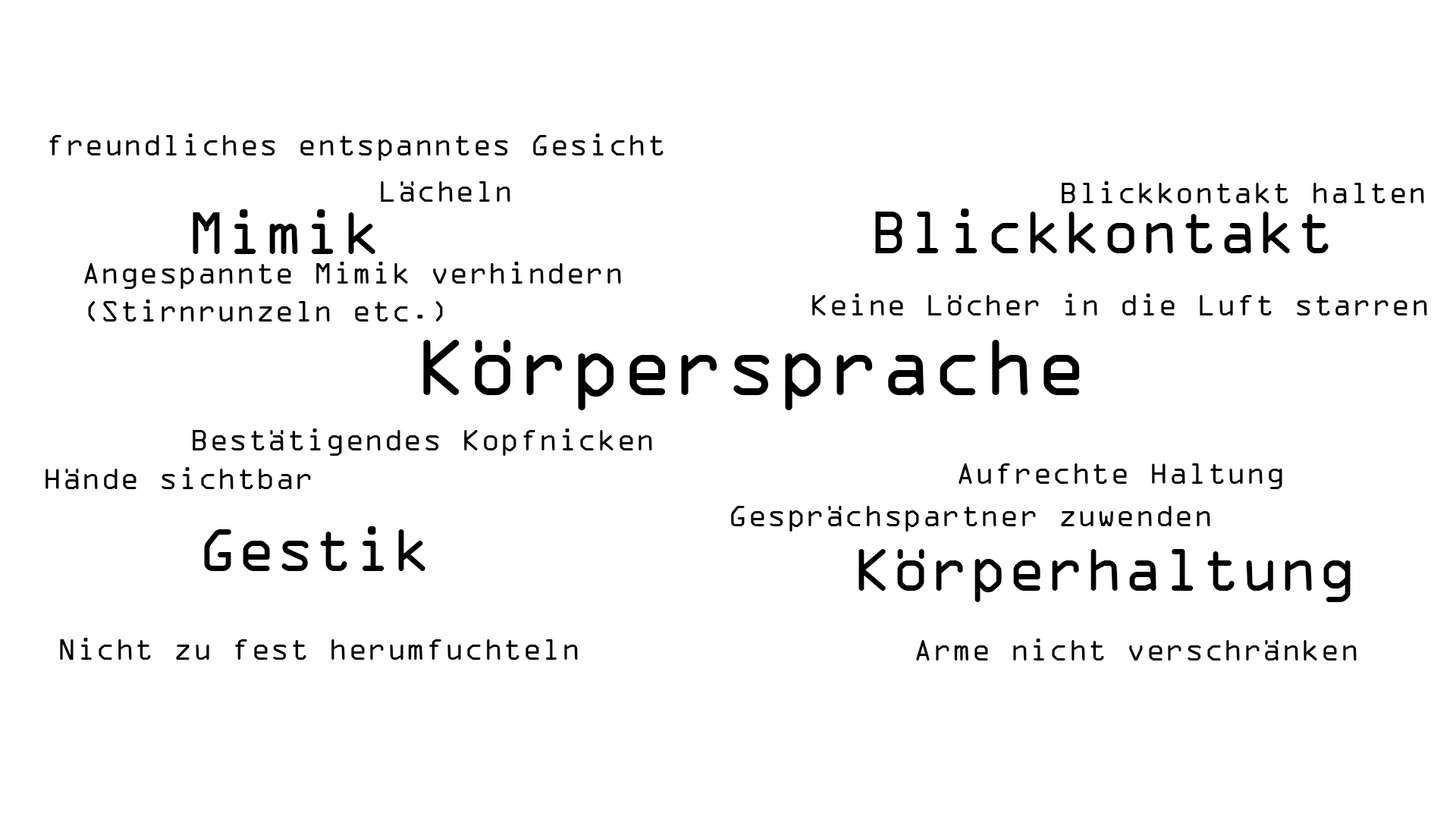
<style>
.page{position:relative;width:1456px;height:819px;background:#ffffff}
.page>*{position:absolute;margin:0}
.t1{font:32.1px "OCRAExtended";color:#000000}
.t2{font:64.2px "OCRAExtended";color:#000000}
.t3{font:85.6px "OCRAExtended";color:#000000}
</style>
<div class="page">
<p class="t1" style="left:49px;top:133px;width:615px;height:28px">freundliches entspanntes Gesicht</p>
<p class="t1" style="left:381px;top:181px;width:129px;height:21px">Lächeln</p>
<p class="t1" style="left:1062px;top:181px;width:362px;height:22px">Blickkontakt halten</p>
<p class="t2" style="left:193px;top:209px;width:182px;height:45px">Mimik</p>
<p class="t2" style="left:875px;top:209px;width:454px;height:44px">Blickkontakt</p>
<p class="t1" style="left:84px;top:262px;width:537px;height:60px">Angespannte Mimik verhindern <br>(Stirnrunzeln etc.)</p>
<p class="t1" style="left:812px;top:293px;width:615px;height:22px">Keine Löcher in die Luft starren</p>
<p class="t3" style="left:423px;top:340px;width:657px;height:70px">Körpersprache</p>
<p class="t1" style="left:193px;top:428px;width:459px;height:28px">Bestätigendes Kopfnicken</p>
<p class="t1" style="left:45px;top:467px;width:266px;height:22px">Hände sichtbar</p>
<p class="t1" style="left:959px;top:463px;width:323px;height:26px">Aufrechte Haltung</p>
<p class="t1" style="left:731px;top:506px;width:479px;height:26px">Gesprächspartner zuwenden</p>
<p class="t2" style="left:204px;top:526px;width:221px;height:45px">Gestik</p>
<p class="t2" style="left:858px;top:549px;width:493px;height:53px">Körperhaltung</p>
<p class="t1" style="left:60px;top:638px;width:518px;height:22px">Nicht zu fest herumfuchteln</p>
<p class="t1" style="left:916px;top:639px;width:441px;height:21px">Arme nicht verschränken</p>
</div>
